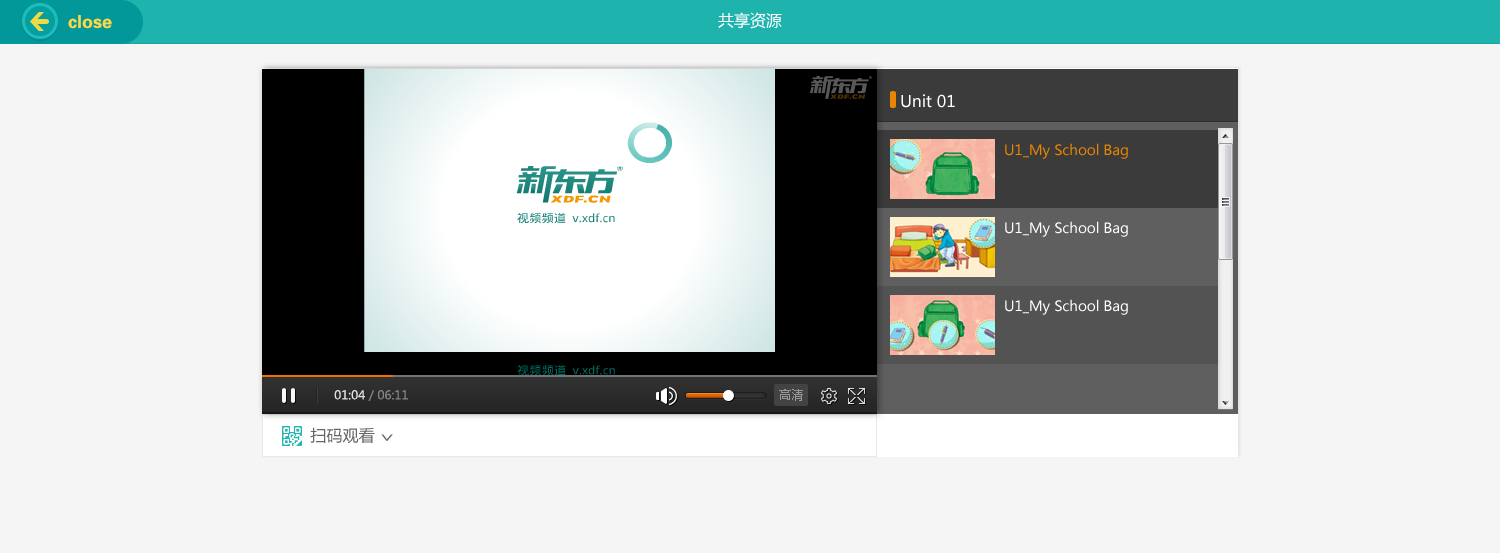
<style>
.page{position:relative;width:1500px;height:553px;background:#f5f5f5}
.page>*{position:absolute;margin:0}
.t1{font:16px "MicrosoftYaHei";color:#ffffff}
.t2{font:14px "MicrosoftYaHei";color:#e98601}
.t3{font:14px "MicrosoftYaHei";color:#ffffff}
.t4{font:12px "MicrosoftYaHei";color:#848484}
.t5{font:12px "MicrosoftYaHei";color:#e0e0e0}
.t6{font:12px "MicrosoftYaHei";color:#979797}
.t7{font:16px "MicrosoftYaHei";color:#666666}
.t8{font:22.1px "MicrosoftYaHei";color:#666666;scale:0.63 1}
</style>
<div class="page">
<p class="t1" style="left:718px;top:12px;width:64px;height:17px">共享资源</p>
<p class="t1" style="left:901px;top:94px;width:54px;height:14px">Unit 01</p>
<p class="t2" style="left:1005px;top:143px;width:123px;height:16px">U1_My School Bag</p>
<p class="t3" style="left:1005px;top:221px;width:123px;height:16px">U1_My School Bag</p>
<p class="t3" style="left:1005px;top:299px;width:123px;height:16px">U1_My School Bag</p>
<p class="t4" style="left:334px;top:390px;width:74px;height:11px"><span class="t5">01:04 </span>/ 06:11</p>
<p class="t6" style="left:779px;top:389px;width:24px;height:12px">高清</p>
<p class="t7" style="left:310px;top:427px;width:65px;height:17px">扫码观看</p>
<p class="t8" style="left:381px;top:434px;width:12px;height:7px;rotate:90deg">&gt;</p>
</div>
